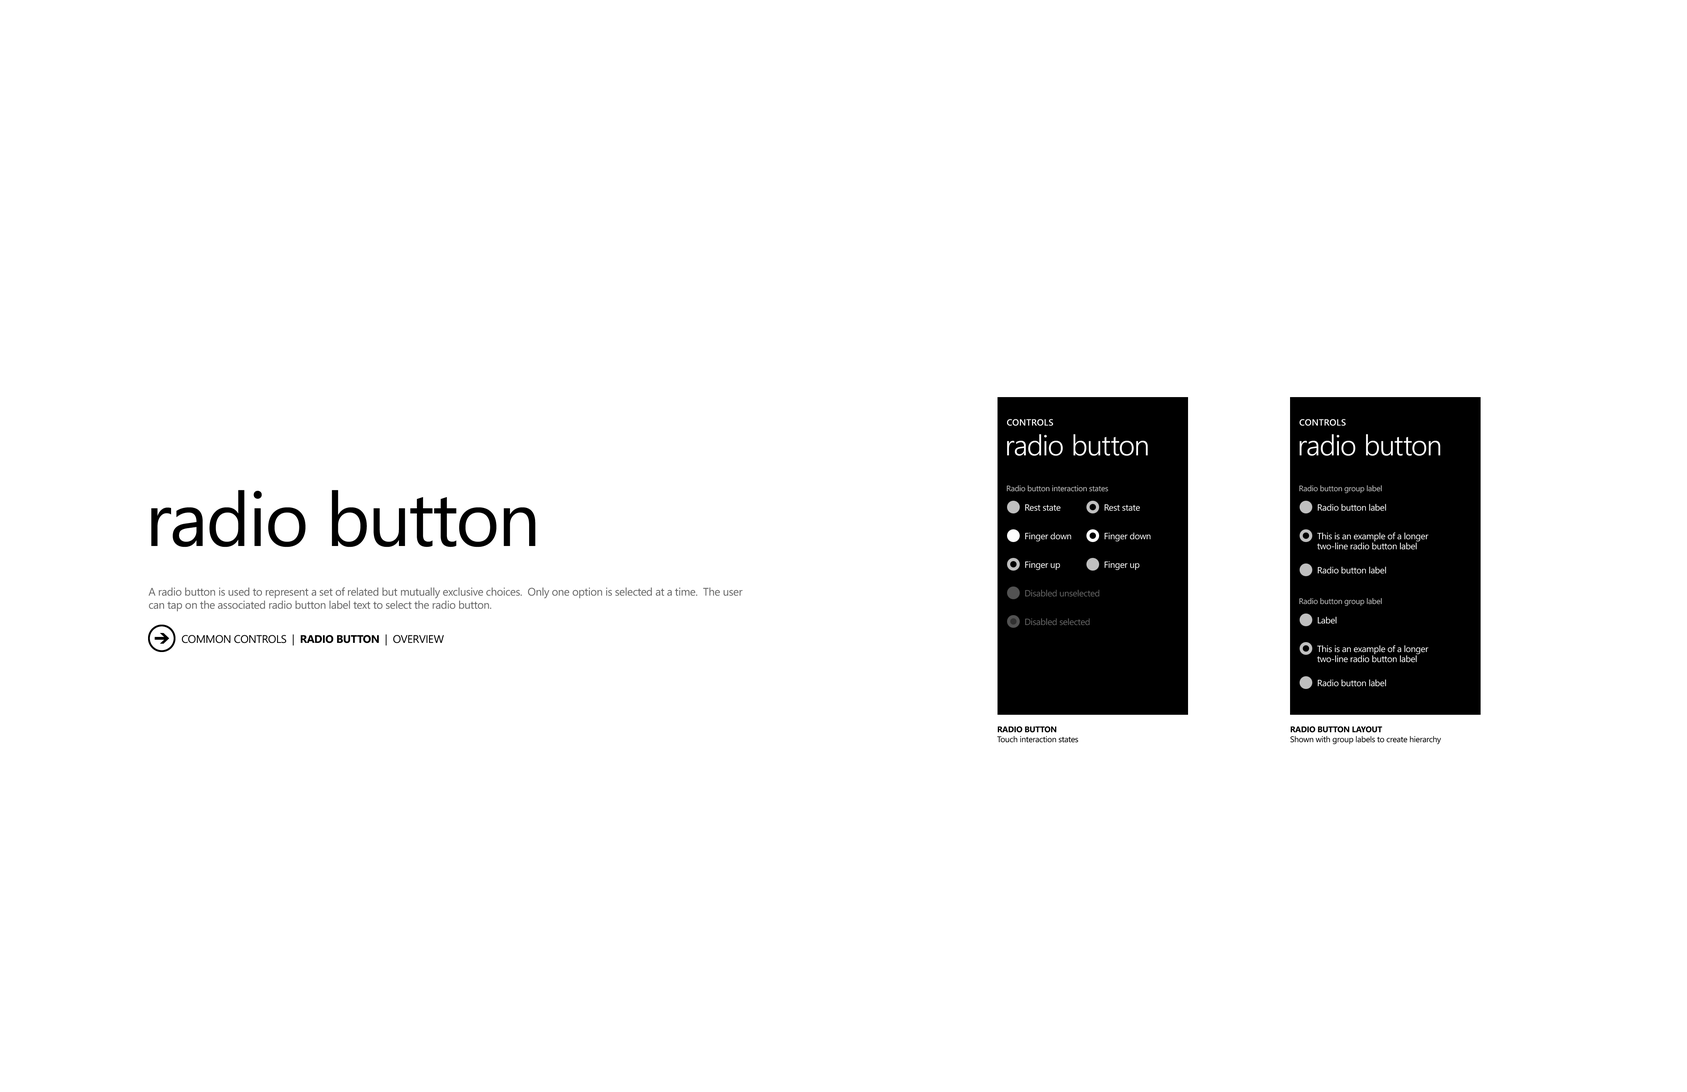
<style>
.page{position:relative;width:1687px;height:1092px;background:#ffffff}
.page>*{position:absolute;margin:0}
.t1{font:9px "SegoeWP-Semibold";letter-spacing:0.025em;color:#ffffff;text-transform:uppercase}
.t2{font:28.6px "SegoeWP-SemiLight";letter-spacing:-0.01em;color:#ffffff}
.t3{font:7.9px "ZegoeUI";letter-spacing:-0.025em;color:#bfbfbf}
.t4{font:7.9px "SegoeWP";letter-spacing:-0.025em;color:#bfbfbf}
.t5{font:75.3px "SegoeWP";letter-spacing:-0.025em;color:#000000}
.t6{font:9px "SegoeWP";letter-spacing:-0.025em;color:#ffffff}
.t7{font:9px/10.1px "SegoeWP";letter-spacing:-0.025em;color:#ffffff}
.t8{font:11px "SegoeWP";letter-spacing:-0.025em;color:#666666}
.t9{font:9px "SegoeWP";letter-spacing:-0.025em;color:#666666}
.t10{font:11px "SegoeWP";letter-spacing:-0.025em;color:#000000}
.t11{font:11px "SegoeWP-Bold";letter-spacing:-0.025em;color:#000000}
.t12{font:8.3px "SegoeWP";letter-spacing:-0.025em;color:#000000}
.t13{font:8.3px "SegoeWP-Bold";letter-spacing:-0.025em;color:#000000;text-transform:uppercase}
</style>
<div class="page">
<p class="t1" style="left:1007px;top:419px;width:46px;height:7px">controls</p>
<p class="t1" style="left:1300px;top:419px;width:46px;height:7px">controls</p>
<p class="t2" style="left:1007px;top:434px;width:141px;height:22px">radio button</p>
<p class="t2" style="left:1300px;top:434px;width:141px;height:22px">radio button</p>
<p class="t3" style="left:1007px;top:485px;width:102px;height:7px">Radio button interaction states</p>
<p class="t4" style="left:1300px;top:485px;width:82px;height:8px">Radio button group label</p>
<p class="t5" style="left:151px;top:490px;width:385px;height:57px">radio button</p>
<p class="t6" style="left:1026px;top:504px;width:35px;height:7px">Rest state</p>
<p class="t6" style="left:1105px;top:504px;width:35px;height:7px">Rest state</p>
<p class="t6" style="left:1318px;top:504px;width:69px;height:7px">Radio button label</p>
<p class="t6" style="left:1026px;top:532px;width:46px;height:10px">Finger down</p>
<p class="t6" style="left:1105px;top:532px;width:46px;height:10px">Finger down</p>
<p class="t7" style="left:1317px;top:532px;width:112px;height:18px">This is an example of a longer<br>two-line radio button label</p>
<p class="t6" style="left:1026px;top:561px;width:35px;height:9px">Finger up</p>
<p class="t6" style="left:1105px;top:561px;width:35px;height:9px">Finger up</p>
<p class="t6" style="left:1318px;top:567px;width:69px;height:7px">Radio button label</p>
<p class="t8" style="left:148px;top:587px;width:595px;height:24px">A radio button is used to represent a set of related but mutually exclusive choices.  Only one option is selected at a time.  The user can tap on the associated radio button label text to select the radio button.</p>
<p class="t9" style="left:1026px;top:590px;width:74px;height:7px">Disabled unselected</p>
<p class="t4" style="left:1300px;top:598px;width:82px;height:8px">Radio button group label</p>
<p class="t6" style="left:1318px;top:617px;width:19px;height:7px">Label</p>
<p class="t9" style="left:1026px;top:618px;width:64px;height:7px">Disabled selected</p>
<p class="t10" style="left:182px;top:634px;width:262px;height:12px">COMMON CONTROLS  |  <span class="t11">RADIO BUTTON</span>  |  OVERVIEW</p>
<p class="t7" style="left:1317px;top:645px;width:112px;height:17px">This is an example of a longer<br>two-line radio button label</p>
<p class="t6" style="left:1318px;top:679px;width:69px;height:8px">Radio button label</p>
<p class="t12" style="left:997px;top:726px;width:81px;height:16px"><span class="t13">radio button<br></span>Touch interaction states</p>
<p class="t12" style="left:1291px;top:726px;width:151px;height:18px"><span class="t13">radio button layout<br></span>Shown with group labels to create hierarchy</p>
</div>
